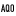
<style>
.page{position:relative;width:16px;height:16px;background:#ffffff}
.page>*{position:absolute;margin:0}
.t1{font:10.8px "DINEngschriftStd";color:#000000}
</style>
<div class="page">
<p class="t1" style="left:1px;top:4px;width:13px;height:8px">AQO</p>
</div>
